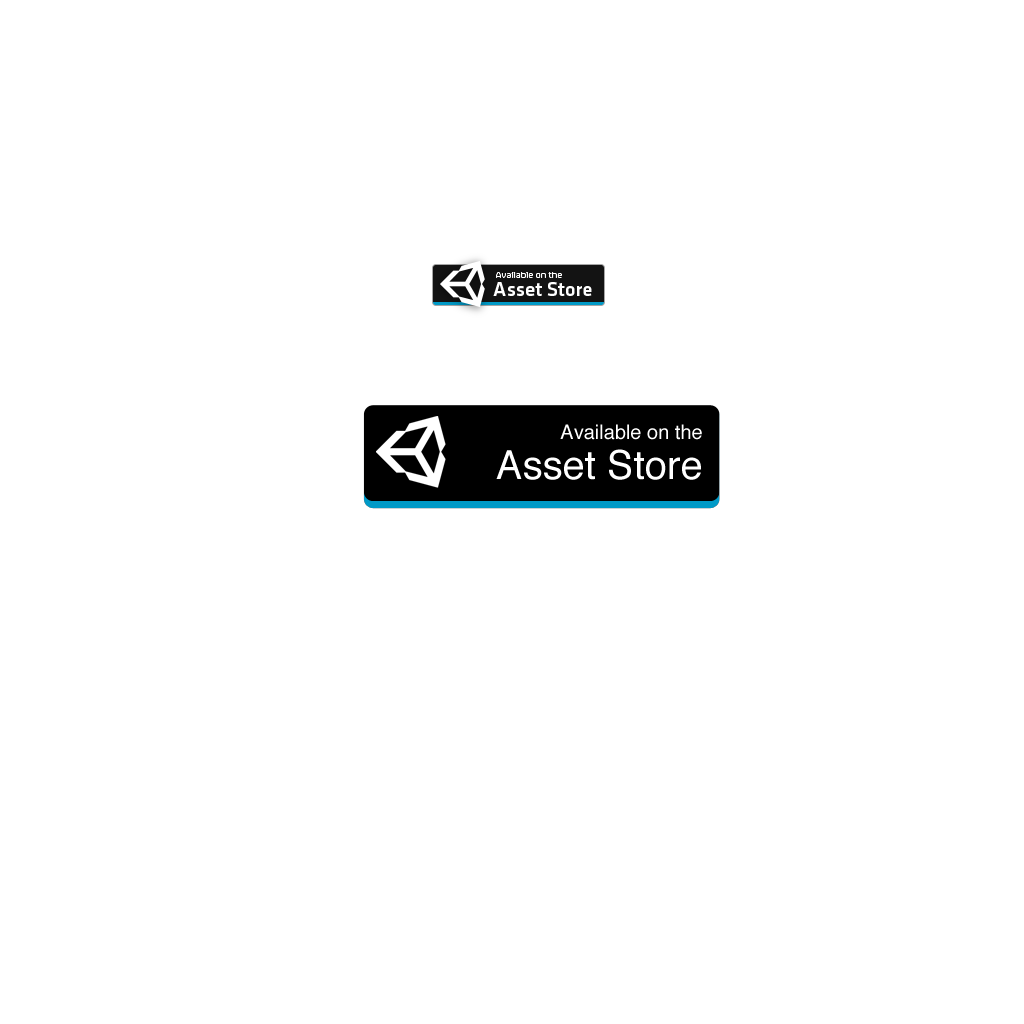
<style>
.page{position:relative;width:1024px;height:1024px;background:#ffffff}
.page>*{position:absolute;margin:0}
.t1{font:20px "Helvetica";color:#ffffff}
.t2{font:40px/40px "Helvetica";color:#ffffff}
</style>
<div class="page">
<p class="t1" style="left:496px;top:424px;width:206px;height:56px;text-align:right">Available on the<br><span class="t2">Asset Store</span></p>
</div>
